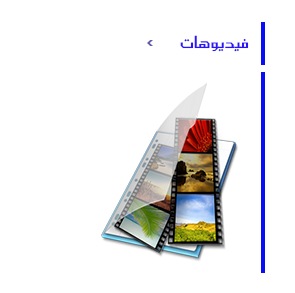
<style>
.page{position:relative;width:295px;height:293px;background:#ffffff}
.page>*{position:absolute;margin:0}
.t1{font:20px "SC_KHALID";color:#2b16f5}
</style>
<div class="page">
<p class="t1" style="left:180px;top:35px;width:69px;height:17px">فيديوهات</p>
</div>
